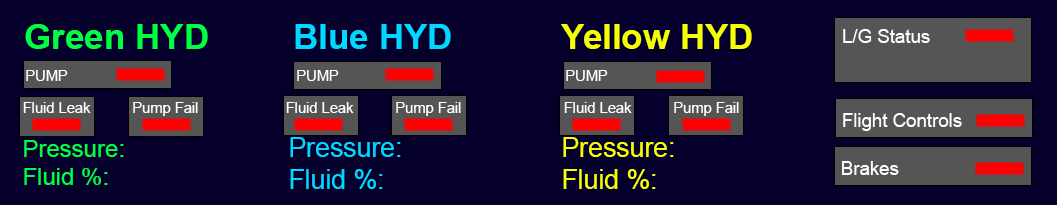
<style>
.page{position:relative;width:1057px;height:205px;background:#04002b}
.page>*{position:absolute;margin:0}
.t1{font:35px "Arial-BoldMT";color:#00ff42}
.t2{font:35px "Arial-BoldMT";color:#00d8ff}
.t3{font:35px "Arial-BoldMT";color:#f6ff00}
.t4{font:18.7px "ArialMT";color:#ffffff}
.t5{font:14.7px "ArialMT";color:#ffffff}
.t6{font:26.7px "ArialMT";color:#00d8ff}
.t7{font:26.7px "ArialMT";color:#f6ff00}
.t8{font:24px "ArialMT";color:#00ff42}
</style>
<div class="page">
<p class="t1" style="left:25px;top:24px;width:183px;height:25px">Green HYD</p>
<p class="t2" style="left:295px;top:24px;width:156px;height:25px">Blue HYD</p>
<p class="t3" style="left:561px;top:24px;width:191px;height:25px">Yellow HYD</p>
<p class="t4" style="left:843px;top:29px;width:87px;height:14px">L/G Status</p>
<p class="t5" style="left:26px;top:70px;width:42px;height:11px">PUMP</p>
<p class="t5" style="left:297px;top:70px;width:42px;height:11px">PUMP</p>
<p class="t5" style="left:566px;top:70px;width:42px;height:11px">PUMP</p>
<p class="t5" style="left:23px;top:102px;width:68px;height:11px">Fluid Leak</p>
<p class="t5" style="left:133px;top:102px;width:65px;height:14px">Pump Fail</p>
<p class="t5" style="left:286px;top:102px;width:68px;height:11px">Fluid Leak</p>
<p class="t5" style="left:396px;top:102px;width:65px;height:14px">Pump Fail</p>
<p class="t5" style="left:564px;top:102px;width:68px;height:11px">Fluid Leak</p>
<p class="t5" style="left:674px;top:102px;width:65px;height:14px">Pump Fail</p>
<p class="t4" style="left:843px;top:113px;width:119px;height:18px">Flight Controls</p>
<p class="t6" style="left:290px;top:137px;width:111px;height:52px">Pressure:<br>Fluid %:</p>
<p class="t7" style="left:563px;top:137px;width:111px;height:52px">Pressure:<br>Fluid %:</p>
<p class="t8" style="left:24px;top:140px;width:100px;height:45px">Pressure:<br>Fluid %:</p>
<p class="t4" style="left:842px;top:161px;width:57px;height:14px">Brakes</p>
</div>
